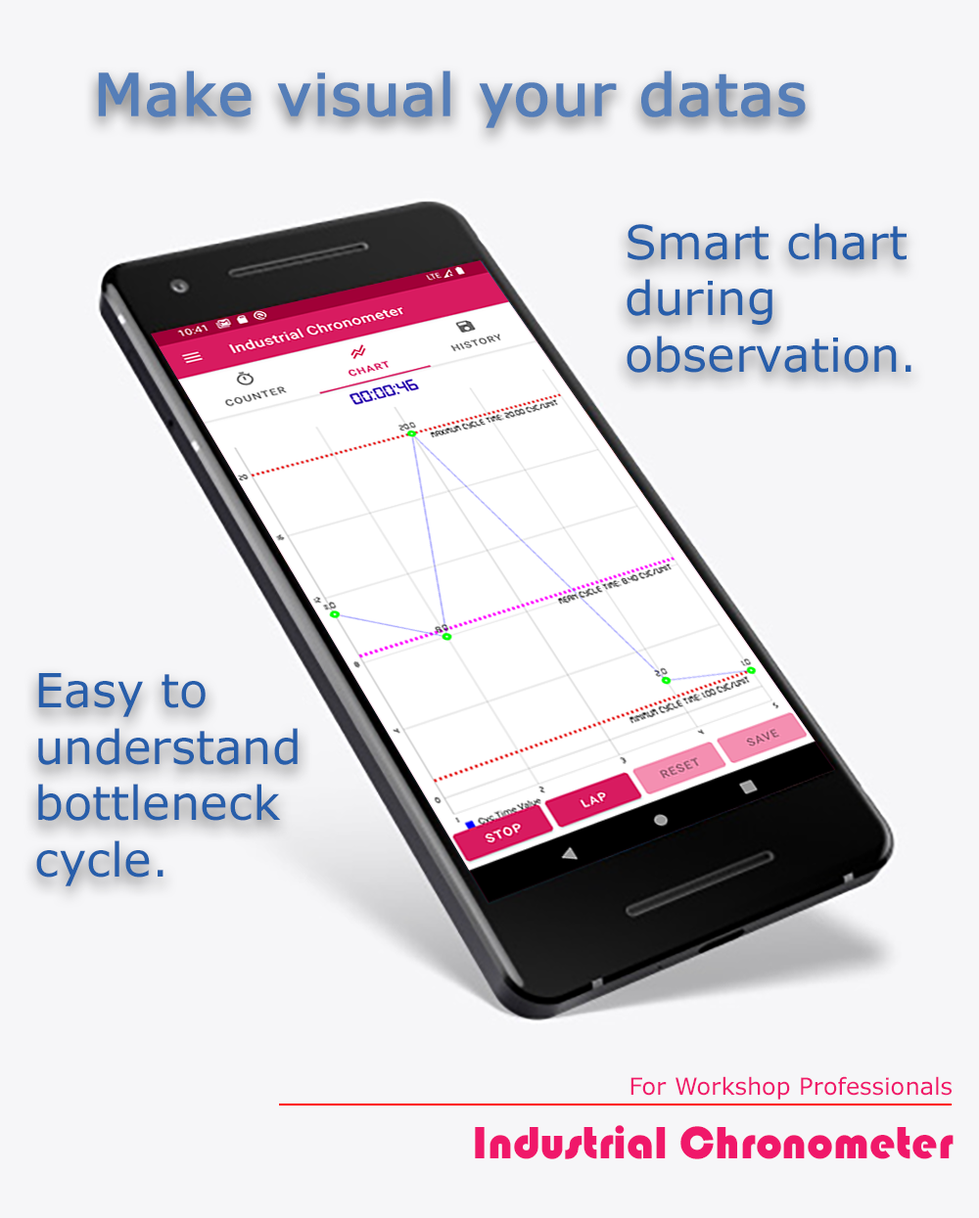
<style>
.page{position:relative;width:979px;height:1218px;background:#f6f6f8}
.page>*{position:absolute;margin:0}
.t1{font:58.7px "MSReferenceSansSerif";color:#557eb8;font-weight:bold}
.t2{font:47px "MSReferenceSansSerif";color:#275eaa}
.t3{font:23.5px "MSReferenceSansSerif";color:#f0186a}
.t4{font:47px "Bauhaus93";color:#f0186a}
</style>
<div class="page">
<p class="t1" style="left:98px;top:70px;width:707px;height:58px">Make visual your datas</p>
<p class="t2" style="left:626px;top:223px;width:285px;height:150px">Smart chart during observation.</p>
<p class="t2" style="left:36px;top:673px;width:262px;height:214px">Easy to understand bottleneck cycle.</p>
<p class="t3" style="left:630px;top:1077px;width:321px;height:23px">For Workshop Professionals</p>
<p class="t4" style="left:475px;top:1125px;width:478px;height:35px">Industrial Chronometer</p>
</div>
